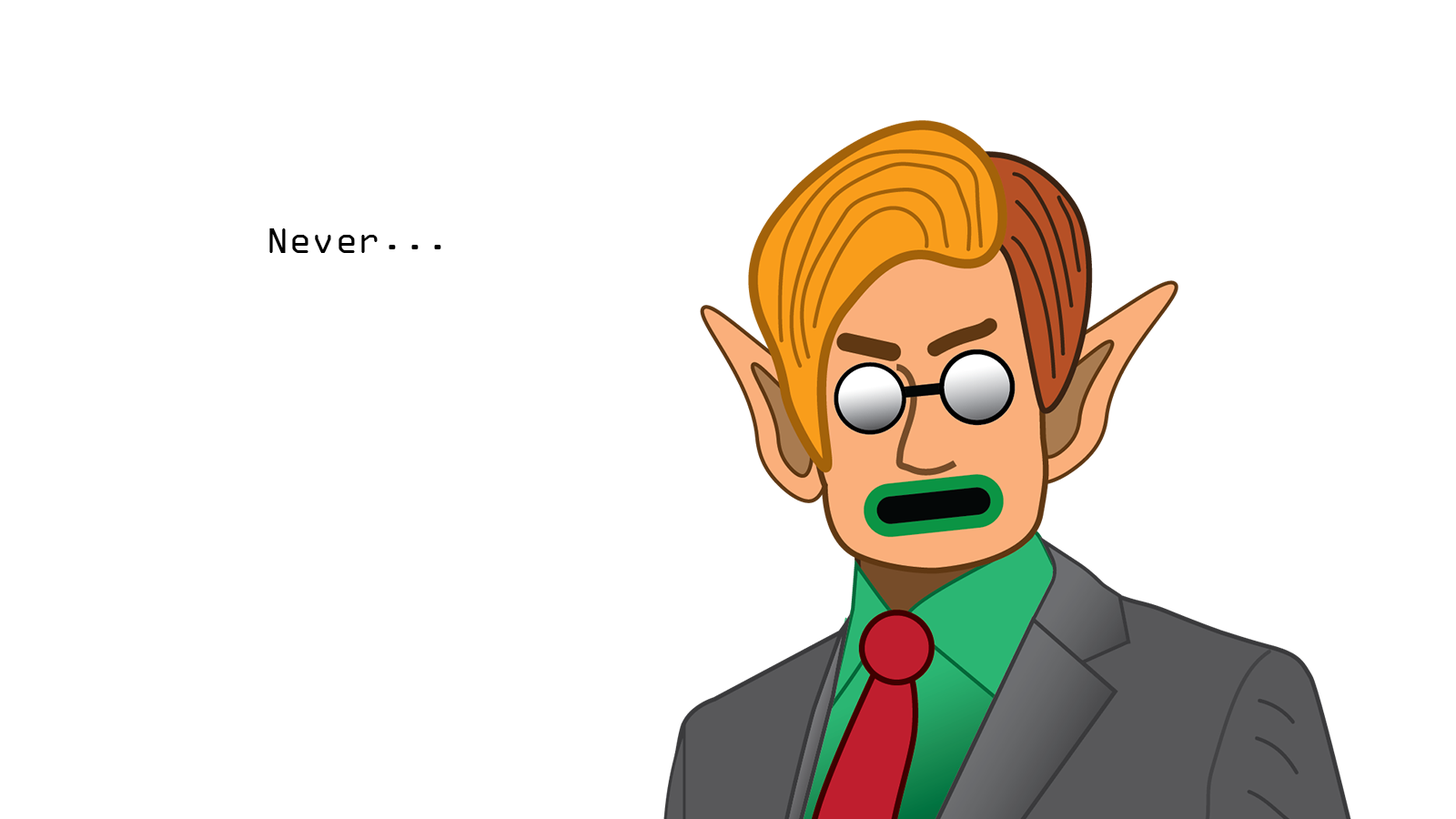
<style>
.page{position:relative;width:1456px;height:819px;background:#ffffff}
.page>*{position:absolute;margin:0}
.t1{font:37.9px "OCRAExtended";color:#000000}
</style>
<div class="page">
<p class="t1" style="left:269px;top:228px;width:172px;height:25px">Never...</p>
</div>
